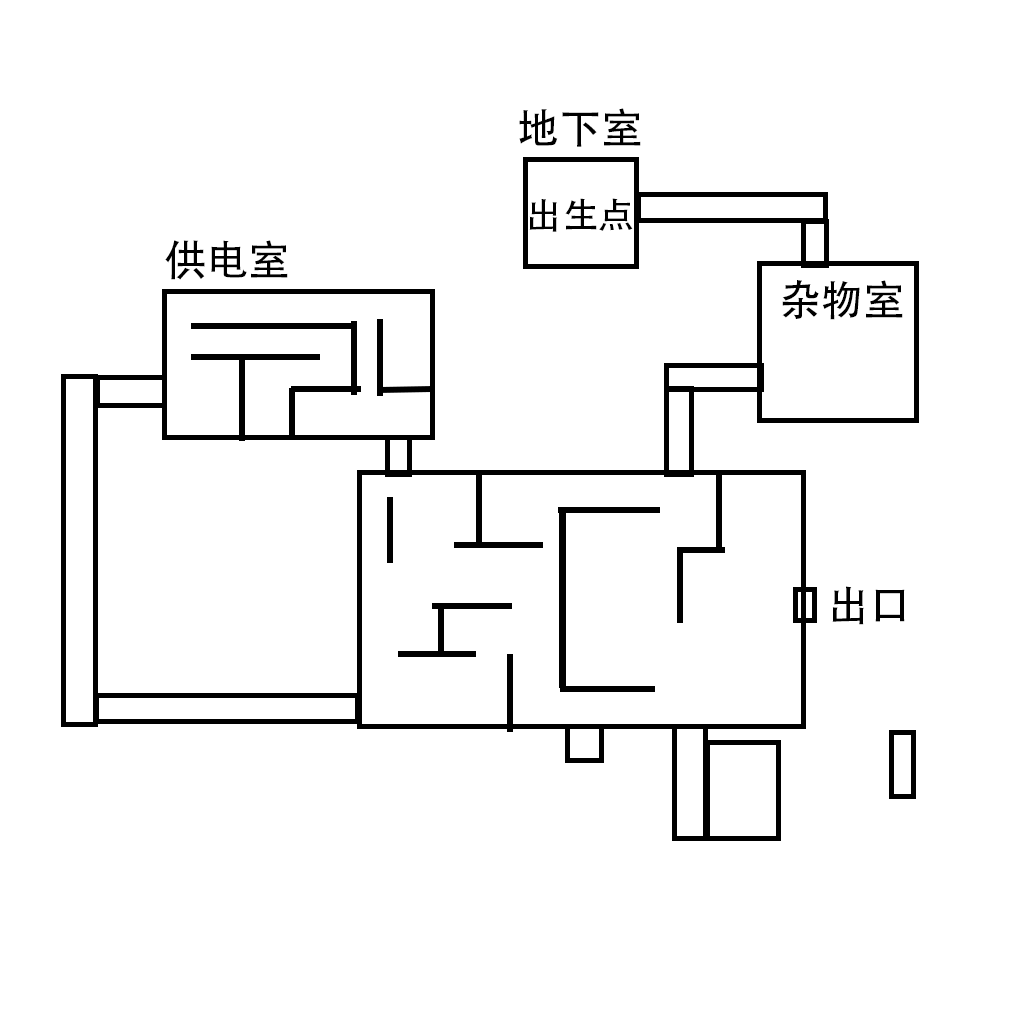
<style>
.page{position:relative;width:1024px;height:1024px;background:#ffffff}
.page>*{position:absolute;margin:0}
.t1{font:42px "AdobeHeitiStd-Regular";color:#000000}
.t2{font:36.5px "AdobeHeitiStd-Regular";color:#000000}
</style>
<div class="page">
<p class="t1" style="left:519px;top:108px;width:122px;height:39px">地下室</p>
<p class="t2" style="left:529px;top:198px;width:104px;height:34px">出生点</p>
<p class="t1" style="left:165px;top:240px;width:123px;height:40px">供电室</p>
<p class="t1" style="left:782px;top:280px;width:121px;height:40px">杂物室</p>
<p class="t1" style="left:832px;top:586px;width:73px;height:39px">出口</p>
</div>
